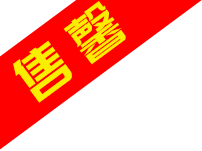
<style>
.page{position:relative;width:202px;height:151px;background:#ffffff}
.page>*{position:absolute;margin:0}
.t1{font:64.6px "PangMenZhengDao";letter-spacing:0.272em;color:#faee00;scale:0.83 1}
</style>
<div class="page">
<p class="t1" style="left:13px;top:1px;width:113px;height:102px;rotate:-36deg">售馨</p>
</div>
